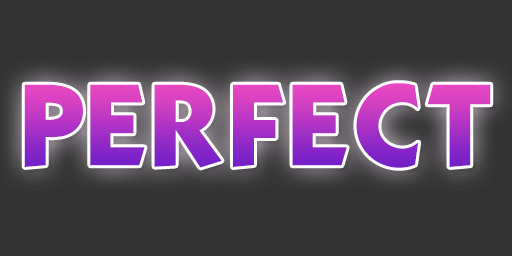
<style>
.page{position:relative;width:512px;height:256px;background:#333333}
.page>*{position:absolute;margin:0}
.t1{font:100px "KabelBdNormal"}
</style>
<div class="page">
<p class="t1" style="left:24px;top:83px;width:467px;height:85px">PERFECT</p>
</div>
